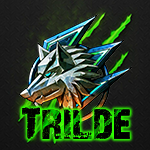
<style>
.page{position:relative;width:150px;height:150px}
.page>*{position:absolute;margin:0}
.t1{font:44px "28DaysLater";color:#020202}
</style>
<div class="page">
<p class="t1" style="left:22px;top:107px;width:108px;height:32px">Trilde</p>
</div>
